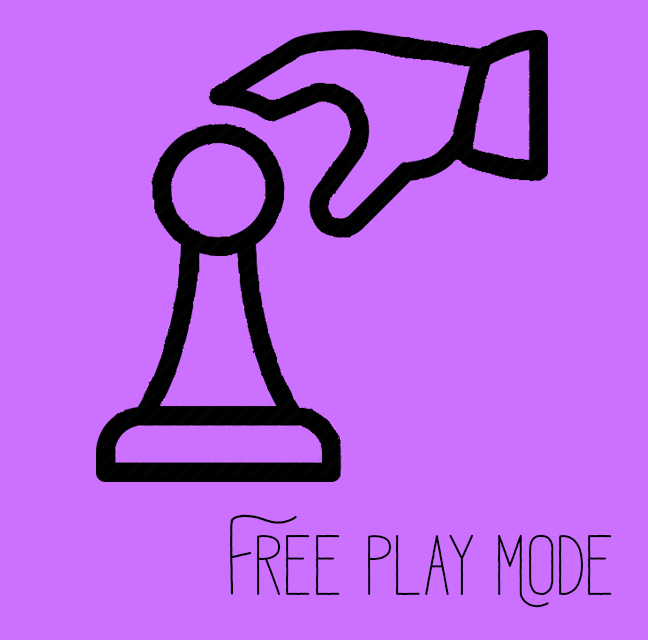
<style>
.page{position:relative;width:648px;height:640px;background:#cb70ff}
.page>*{position:absolute;margin:0}
.t1{font:120px "Adrift";color:#000000}
</style>
<div class="page">
<p class="t1" style="left:230px;top:514px;width:382px;height:94px">Free Play Mode</p>
</div>
